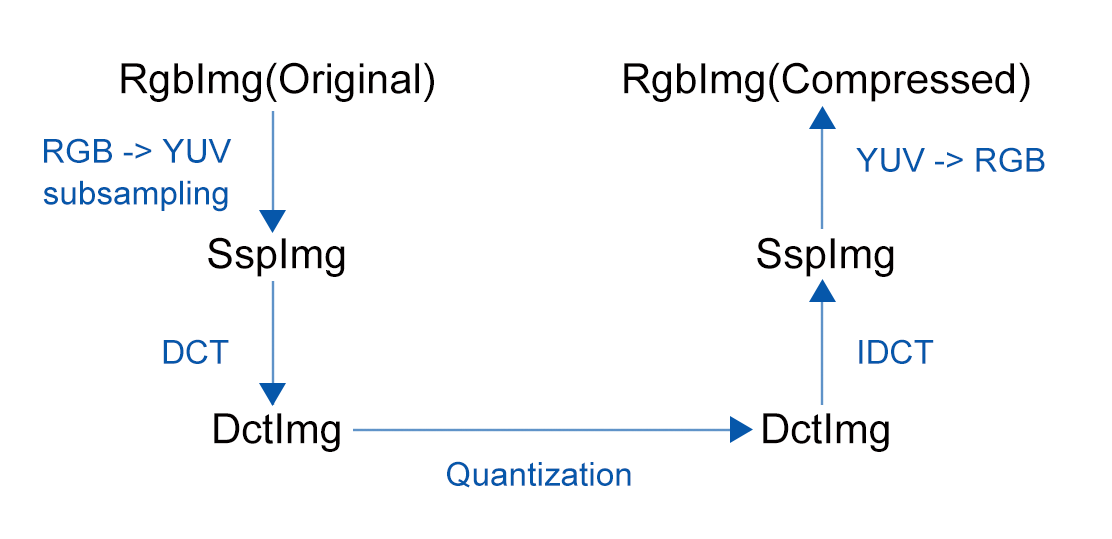
<style>
.page{position:relative;width:1112px;height:539px;background:#ffffff}
.page>*{position:absolute;margin:0}
.t1{font:41.7px/58.3px "ArialMT";color:#030000}
.t2{font:33.3px/41.7px "ArialMT";color:#0657aa}
.t3{font:33.3px "ArialMT";color:#0657aa}
</style>
<div class="page">
<p class="t1" style="left:121px;top:62px;width:313px;height:390px;text-align:center">RgbImg(Original)<br><br><br>SspImg<br><br><br>DctImg</p>
<p class="t1" style="left:624px;top:62px;width:406px;height:390px;text-align:center">RgbImg(Compressed)<br><br><br>SspImg<br><br><br>DctImg</p>
<p class="t2" style="left:43px;top:138px;width:189px;height:74px;text-align:center">RGB -&gt; YUV<br>subsampling</p>
<p class="t3" style="left:856px;top:147px;width:189px;height:25px">YUV -&gt; RGB</p>
<p class="t3" style="left:163px;top:339px;width:66px;height:25px">DCT</p>
<p class="t3" style="left:859px;top:339px;width:75px;height:25px">IDCT</p>
<p class="t3" style="left:447px;top:461px;width:184px;height:27px">Quantization</p>
</div>
